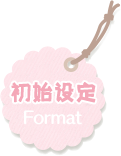
<style>
.page{position:relative;width:121px;height:156px;background:#ffffff}
.page>*{position:absolute;margin:0}
.t1{font:13.5px "shetumodengxiaofangti";color:#f4a8b8;font-weight:bold;scale:0.94 1}
</style>
<div class="page">
<p class="t1" style="left:11px;top:82px;width:85px;height:21px">初始设定</p>
</div>
